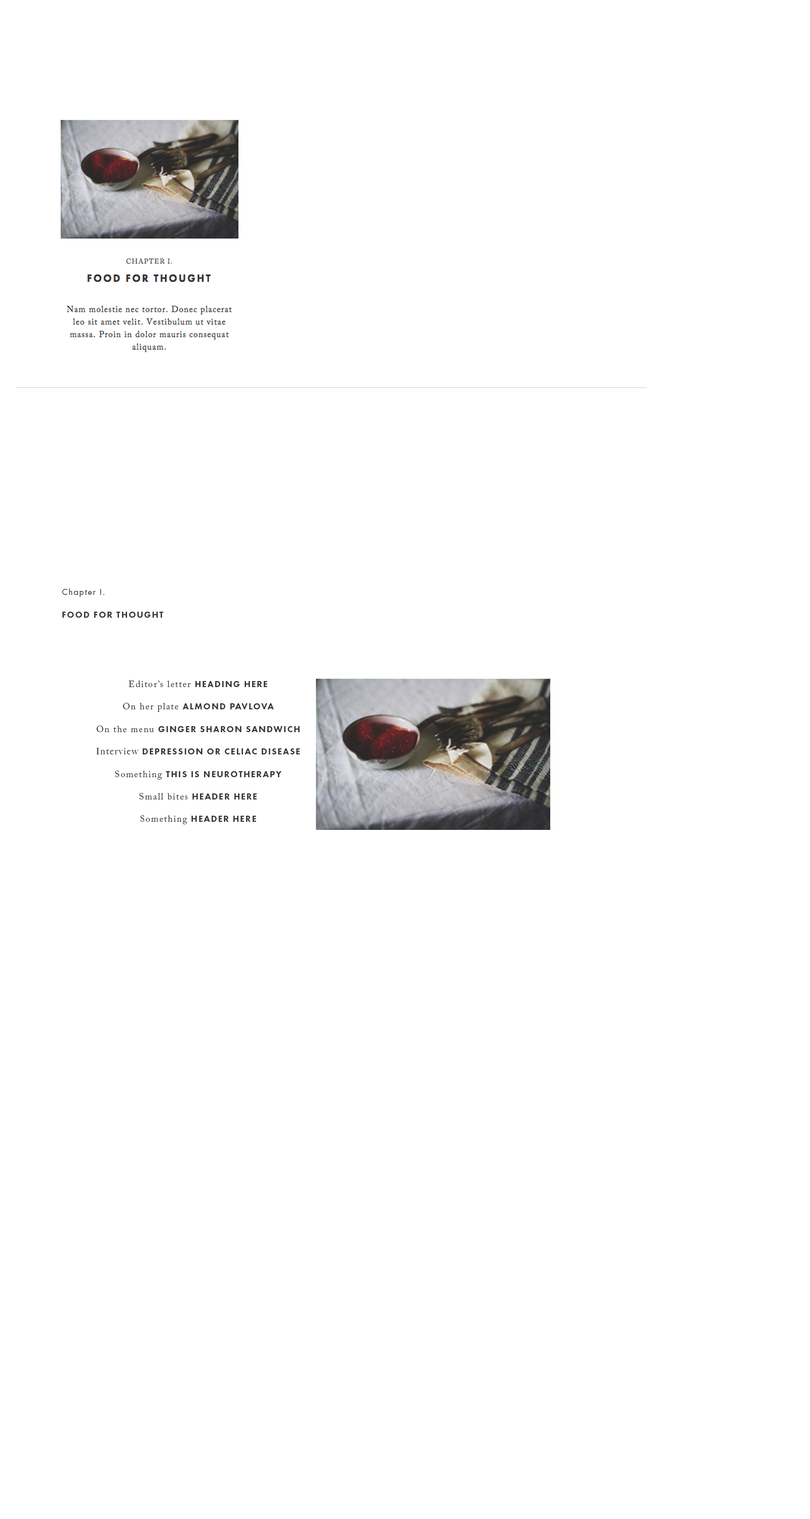
<style>
.page{position:relative;width:810px;height:1519px;background:#ffffff}
.page>*{position:absolute;margin:0}
.t1{font:9px/22.5px "FuturaPT-Heavy";letter-spacing:0.1em;color:#343535;text-transform:uppercase}
.t2{font:9px/22.5px "FuturaPT-Book";letter-spacing:0.1em;color:#343535}
.t3{font:9px/22.5px "FuturaPT-Heavy";letter-spacing:0.1em;color:#343535}
.t4{font:9px/22.5px "ACaslonPro-Regular";letter-spacing:0.1em;color:#343535}
.t5{font:9px/22.5px "BigCaslon-Medium";letter-spacing:0.1em;color:#343535}
</style>
<div class="page">
<p class="t1" style="left:62px;top:588px;width:102px;height:30px"><span class="t2">Chapter I.<br></span>Food for thought</p>
<p class="t3" style="left:96px;top:680px;width:204px;height:144px;text-align:center"><span class="t4">Editor’s letter </span>HEADING HERE<br><span class="t4">On her plate </span>ALMOND PAVLOVA<br><span class="t4">On the menu </span>GINGER SHARON SANDWICH<br><span class="t5">Interview </span>DEPRESSION OR CELIAC DISEASE<br><span class="t4">Something </span>THIS IS NEUROTHERAPY<br><span class="t4">Small bites </span>HEADER HERE<br><span class="t4">Something </span>HEADER HERE</p>
</div>
